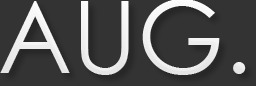
<style>
.page{position:relative;width:256px;height:86px;background:#333333}
.page>*{position:absolute;margin:0}
.t1{font:100px "CenturyGothic";color:#ffffff}
</style>
<div class="page">
<p class="t1" style="left:0px;top:0px;width:246px;height:75px">AUG.</p>
</div>
